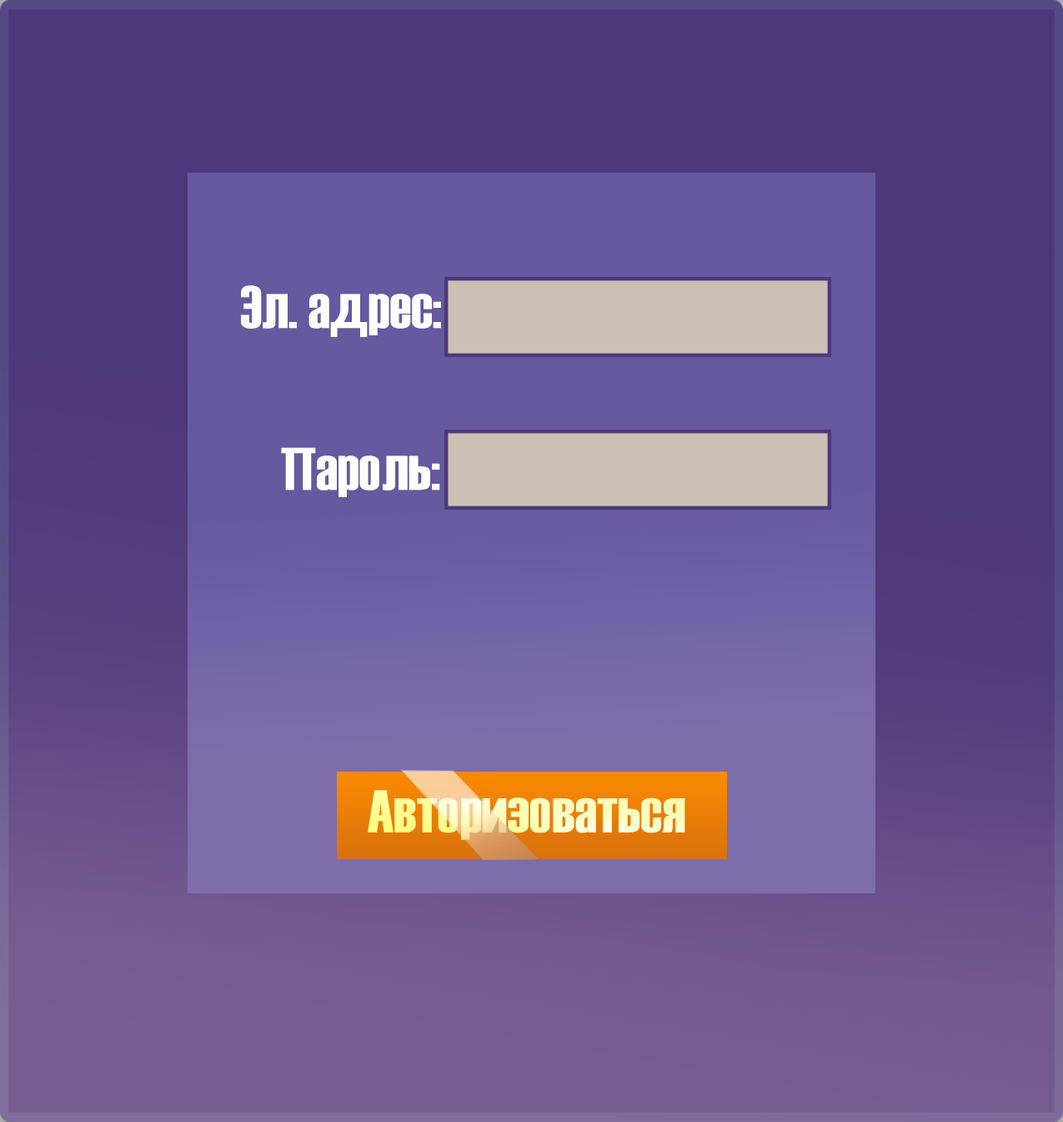
<style>
.page{position:relative;width:1063px;height:1122px;background:#4c397b}
.page>*{position:absolute;margin:0}
.t1{font:60px "Haettenschweiler";color:#ffffff}
.t2{font:60px "Haettenschweiler"}
</style>
<div class="page">
<p class="t1" style="left:241px;top:285px;width:200px;height:52px">Эл. адрес:</p>
<p class="t1" style="left:281px;top:447px;width:159px;height:50px">Пароль:</p>
<p class="t2" style="left:368px;top:790px;width:317px;height:50px">Авторизоваться</p>
</div>
